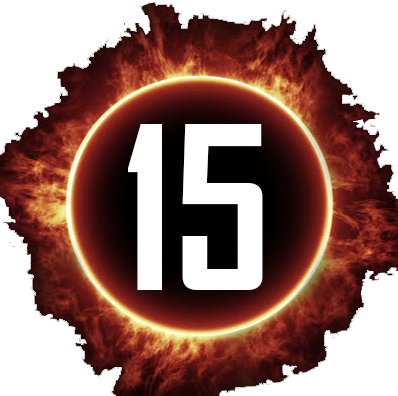
<style>
.page{position:relative;width:398px;height:396px;background:#ffffff}
.page>*{position:absolute;margin:0}
.t1{font:216.6px "AgencyFB-Bold";color:#ffffff}
</style>
<div class="page">
<p class="t1" style="left:128px;top:124px;width:135px;height:166px">15</p>
</div>
